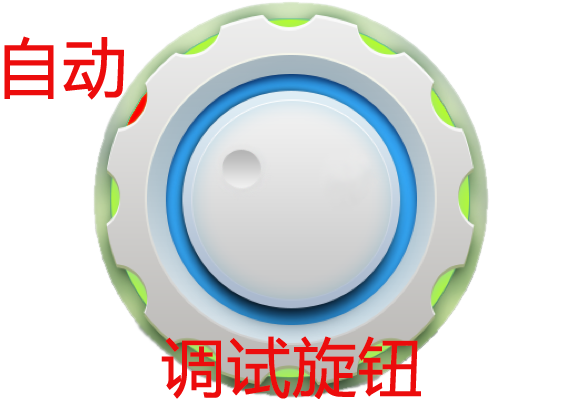
<style>
.page{position:relative;width:581px;height:399px;background:#ffffff}
.page>*{position:absolute;margin:0}
.t1{font:64px "MicrosoftYaHei";color:#ec0c0c;font-weight:bold}
</style>
<div class="page">
<p class="t1" style="left:4px;top:36px;width:120px;height:64px">自动</p>
<p class="t1" style="left:161px;top:336px;width:260px;height:64px">调试旋钮</p>
</div>
